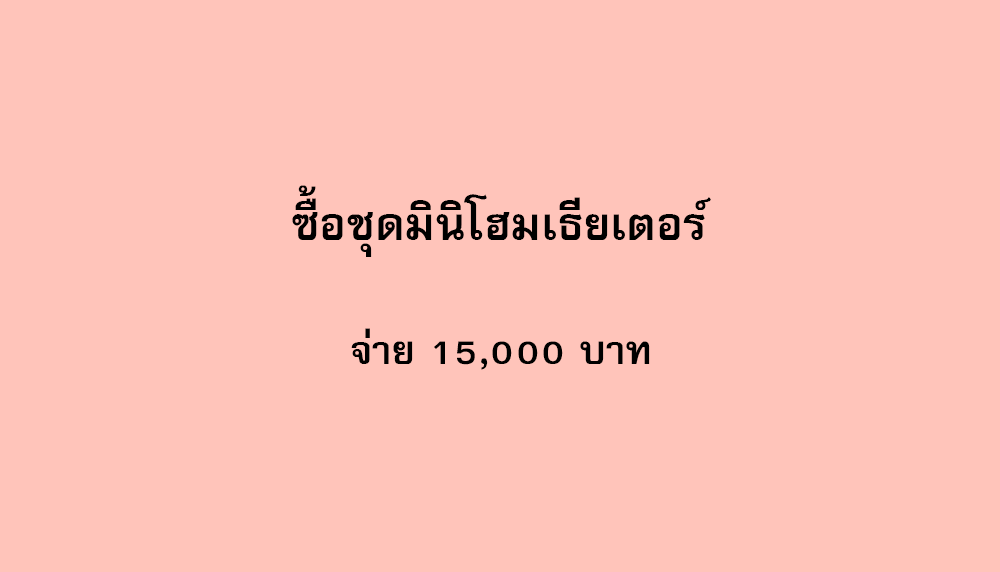
<style>
.page{position:relative;width:1000px;height:572px;background:#ffc4ba}
.page>*{position:absolute;margin:0}
.t1{font:64px "FreesiaUPCBold";color:#000000}
.t2{font:56px "FreesiaUPCBold";color:#000000}
</style>
<div class="page">
<p class="t1" style="left:292px;top:185px;width:419px;height:72px">ซื้อชุดมินิโฮมเธียเตอร์</p>
<p class="t2" style="left:351px;top:328px;width:299px;height:42px">จ่าย 15,000 บาท</p>
</div>
